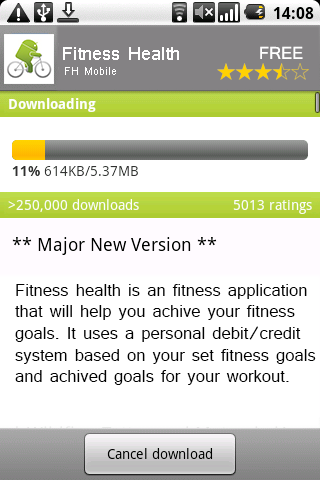
<style>
.page{position:relative;width:320px;height:480px;background:#ffffff}
.page>*{position:absolute;margin:0}
.t1{font:20px "Shruti";color:#ffffff}
.t2{font:12px "Shruti";color:#ffffff}
.t3{font:18px "Shruti";color:#ffffff}
.t4{font:18px "Shruti";color:#000000}
</style>
<div class="page">
<p class="t1" style="left:63px;top:47px;width:116px;height:28px">Fitness Health<br><span class="t2">  FH Mobile</span></p>
<p class="t3" style="left:260px;top:46px;width:43px;height:13px">FREE</p>
<p class="t4" style="left:15px;top:284px;width:301px;height:101px">Fitness health is an fitness application that will help you achive your fitness goals. It uses a personal debit/credit system based on your set fitness goals and achived goals for your workout.</p>
</div>
